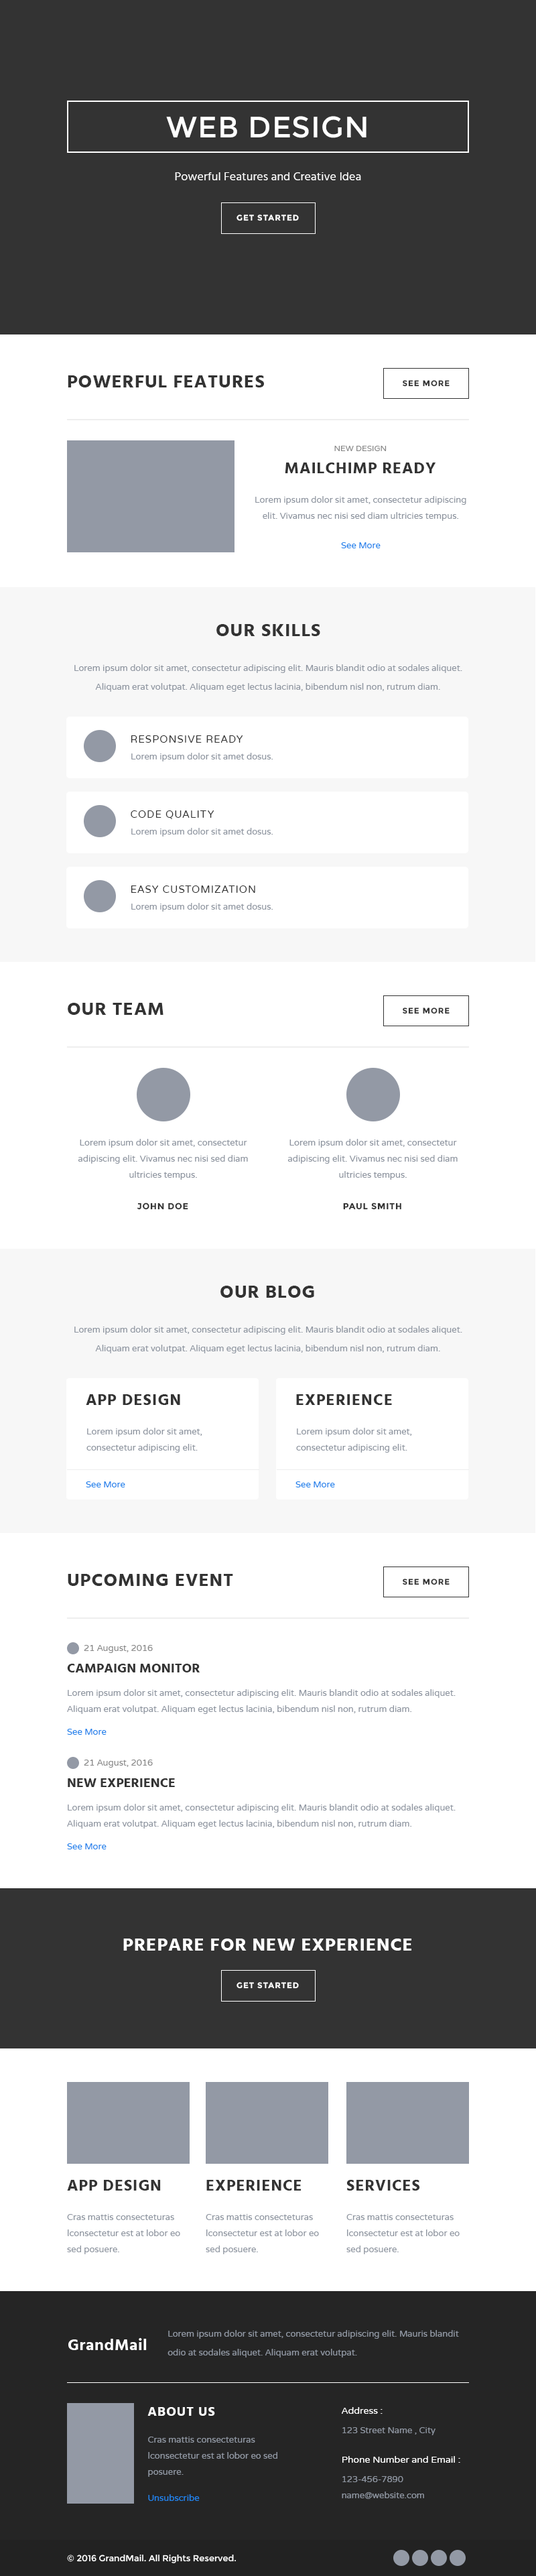
<style>
.page{position:relative;width:536px;height:2576px;background:#ffffff}
.page>*{position:absolute;margin:0}
.t1{font:29.5px "Montserrat-Regular";letter-spacing:0.025em;color:#ffffff}
.t2{font:12.1px "Hind-Regular";color:#ffffff}
.t3{font:8px "Montserrat-Bold";letter-spacing:0.08em;color:#ffffff}
.t4{font:18.8px "Hind-Bold";letter-spacing:0.035em;color:#333333}
.t5{font:8px "Montserrat-Bold";letter-spacing:0.075em;color:#333333}
.t6{font:8px "VarelaRound-Regular";color:#888888}
.t7{font:16.1px "Hind-Bold";letter-spacing:0.04em;color:#333333}
.t8{font:8.7px/16.1px "VarelaRound-Regular";color:#8f96a1}
.t9{font:8.7px "VarelaRound-Regular";color:#2183ec}
.t10{font:18.8px "Hind-Bold";letter-spacing:0.04em;color:#333333}
.t11{font:8.7px/18.8px "VarelaRound-Regular";color:#8f96a1}
.t12{font:10.1px "VarelaRound-Regular";letter-spacing:0.07em;color:#333333}
.t13{font:8.7px "VarelaRound-Regular";color:#8f96a1}
.t14{font:8.7px "Montserrat-Bold";letter-spacing:0.06em;color:#333333}
.t15{font:16.1px "Hind-Bold";letter-spacing:0.045em;color:#333333}
.t16{font:8.7px "VarelaRound-Regular";color:#888888}
.t17{font:13.4px "Hind-Bold";color:#333333}
.t18{font:18.8px "Hind-Bold";letter-spacing:0.035em;color:#ffffff}
.t19{font:13.4px "Hind-Bold";letter-spacing:0.05em;color:#ffffff}
.t20{font:9.4px "VarelaRound-Regular";color:#ffffff}
.t21{font:8.7px "Montserrat-Regular";color:#ffffff}
</style>
<div class="page">
<p class="t1" style="left:166px;top:116px;width:201px;height:22px">WEB DESIGN</p>
<p class="t2" style="left:175px;top:172px;width:186px;height:8px">Powerful Features and Creative Idea</p>
<p class="t3" style="left:237px;top:214px;width:62px;height:7px">GET STARTED</p>
<p class="t4" style="left:68px;top:375px;width:196px;height:12px">POWERFUL FEATURES</p>
<p class="t5" style="left:403px;top:380px;width:47px;height:7px">SEE MORE</p>
<p class="t6" style="left:334px;top:446px;width:53px;height:5px">NEW DESIGN</p>
<p class="t7" style="left:285px;top:463px;width:151px;height:10px">MAILCHIMP READY</p>
<p class="t8" style="left:255px;top:496px;width:212px;height:25px;text-align:center">Lorem ipsum dolor sit amet, consectetur adipiscing elit. Vivamus nec nisi sed diam ultricies tempus.</p>
<p class="t9" style="left:341px;top:542px;width:40px;height:6px">See More</p>
<p class="t10" style="left:217px;top:624px;width:103px;height:12px">OUR SKILLS</p>
<p class="t11" style="left:74px;top:664px;width:389px;height:28px;text-align:center">Lorem ipsum dolor sit amet, consectetur adipiscing elit. Mauris blandit odio at sodales aliquet. Aliquam erat volutpat. Aliquam eget lectus lacinia, bibendum nisl non, rutrum diam.</p>
<p class="t12" style="left:131px;top:735px;width:112px;height:8px">RESPONSIVE READY</p>
<p class="t13" style="left:131px;top:753px;width:142px;height:8px">Lorem ipsum dolor sit amet dosus.</p>
<p class="t12" style="left:131px;top:810px;width:83px;height:9px">CODE QUALITY</p>
<p class="t13" style="left:131px;top:828px;width:142px;height:9px">Lorem ipsum dolor sit amet dosus.</p>
<p class="t12" style="left:131px;top:885px;width:124px;height:8px">EASY CUSTOMIZATION</p>
<p class="t13" style="left:131px;top:903px;width:142px;height:9px">Lorem ipsum dolor sit amet dosus.</p>
<p class="t4" style="left:68px;top:1003px;width:96px;height:12px">OUR TEAM</p>
<p class="t5" style="left:403px;top:1007px;width:47px;height:7px">SEE MORE</p>
<p class="t8" style="left:78px;top:1139px;width:170px;height:41px;text-align:center">Lorem ipsum dolor sit amet, consectetur adipiscing elit. Vivamus nec nisi sed diam ultricies tempus.</p>
<p class="t8" style="left:288px;top:1139px;width:170px;height:41px;text-align:center">Lorem ipsum dolor sit amet, consectetur adipiscing elit. Vivamus nec nisi sed diam ultricies tempus.</p>
<p class="t14" style="left:137px;top:1203px;width:51px;height:7px">JOHN DOE</p>
<p class="t14" style="left:343px;top:1203px;width:59px;height:7px">PAUL SMITH</p>
<p class="t10" style="left:221px;top:1286px;width:93px;height:12px">OUR BLOG</p>
<p class="t11" style="left:74px;top:1326px;width:389px;height:27px;text-align:center">Lorem ipsum dolor sit amet, consectetur adipiscing elit. Mauris blandit odio at sodales aliquet. Aliquam erat volutpat. Aliquam eget lectus lacinia, bibendum nisl non, rutrum diam.</p>
<p class="t15" style="left:86px;top:1394px;width:94px;height:11px">APP DESIGN</p>
<p class="t15" style="left:296px;top:1394px;width:96px;height:11px">EXPERIENCE</p>
<p class="t8" style="left:86px;top:1428px;width:116px;height:25px">Lorem ipsum dolor sit amet, consectetur adipiscing elit.</p>
<p class="t8" style="left:296px;top:1428px;width:116px;height:25px">Lorem ipsum dolor sit amet, consectetur adipiscing elit.</p>
<p class="t9" style="left:86px;top:1481px;width:39px;height:6px">See More</p>
<p class="t9" style="left:296px;top:1481px;width:39px;height:6px">See More</p>
<p class="t4" style="left:68px;top:1574px;width:165px;height:12px">UPCOMING EVENT</p>
<p class="t5" style="left:403px;top:1579px;width:47px;height:6px">SEE MORE</p>
<p class="t16" style="left:84px;top:1645px;width:69px;height:8px">21 August, 2016</p>
<p class="t17" style="left:67px;top:1664px;width:133px;height:8px">CAMPAIGN MONITOR</p>
<p class="t8" style="left:67px;top:1689px;width:389px;height:25px">Lorem ipsum dolor sit amet, consectetur adipiscing elit. Mauris blandit odio at sodales aliquet. Aliquam erat volutpat. Aliquam eget lectus lacinia, bibendum nisl non, rutrum diam.</p>
<p class="t9" style="left:67px;top:1729px;width:40px;height:6px">See More</p>
<p class="t16" style="left:84px;top:1760px;width:69px;height:8px">21 August, 2016</p>
<p class="t17" style="left:68px;top:1778px;width:107px;height:9px">NEW EXPERIENCE</p>
<p class="t8" style="left:67px;top:1804px;width:389px;height:25px">Lorem ipsum dolor sit amet, consectetur adipiscing elit. Mauris blandit odio at sodales aliquet. Aliquam erat volutpat. Aliquam eget lectus lacinia, bibendum nisl non, rutrum diam.</p>
<p class="t9" style="left:67px;top:1843px;width:40px;height:6px">See More</p>
<p class="t18" style="left:123px;top:1939px;width:289px;height:12px">PREPARE FOR NEW EXPERIENCE</p>
<p class="t3" style="left:237px;top:1982px;width:62px;height:7px">GET STARTED</p>
<p class="t7" style="left:67px;top:2180px;width:94px;height:11px">APP DESIGN</p>
<p class="t7" style="left:206px;top:2180px;width:96px;height:11px">EXPERIENCE</p>
<p class="t7" style="left:347px;top:2180px;width:73px;height:11px">SERVICES</p>
<p class="t8" style="left:67px;top:2214px;width:113px;height:40px">Cras mattis consecteturas lconsectetur est at lobor eo sed posuere.</p>
<p class="t8" style="left:206px;top:2214px;width:113px;height:40px">Cras mattis consecteturas lconsectetur est at lobor eo sed posuere.</p>
<p class="t8" style="left:347px;top:2214px;width:113px;height:40px">Cras mattis consecteturas lconsectetur est at lobor eo sed posuere.</p>
<p class="t11" style="left:168px;top:2330px;width:291px;height:27px">Lorem ipsum dolor sit amet, consectetur adipiscing elit. Mauris blandit odio at sodales aliquet. Aliquam erat volutpat.</p>
<p class="t19" style="left:147px;top:2407px;width:68px;height:9px">ABOUT US</p>
<p class="t20" style="left:342px;top:2407px;width:41px;height:7px">Address :</p>
<p class="t13" style="left:343px;top:2427px;width:93px;height:8px">123 Street Name , City</p>
<p class="t8" style="left:148px;top:2437px;width:130px;height:40px">Cras mattis consecteturas lconsectetur est at lobor eo sed posuere.</p>
<p class="t20" style="left:343px;top:2456px;width:118px;height:7px">Phone Number and Email :</p>
<p class="t13" style="left:343px;top:2476px;width:61px;height:6px">123-456-7890</p>
<p class="t9" style="left:148px;top:2494px;width:52px;height:7px">Unsubscribe</p>
<p class="t13" style="left:342px;top:2492px;width:82px;height:7px">name@website.com</p>
<p class="t21" style="left:67px;top:2555px;width:169px;height:8px">© 2016 GrandMail. All Rights Reserved.</p>
</div>
